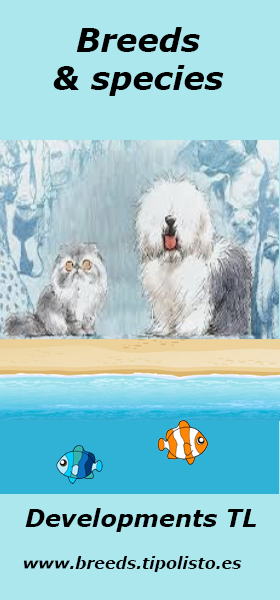
<style>
.page{position:relative;width:280px;height:600px;background:#ace7ed}
.page>*{position:absolute;margin:0}
.t1{font:32px "Verdana-BoldItalic";color:#000000}
.t2{font:24px "Verdana-BoldItalic";color:#010101}
.t3{font:16px "Verdana-BoldItalic";color:#010101}
</style>
<div class="page">
<p class="t1" style="left:53px;top:27px;width:171px;height:69px;text-align:center">Breeds<br>&amp; species</p>
<p class="t2" style="left:25px;top:508px;width:231px;height:24px">Developments TL</p>
<p class="t3" style="left:23px;top:556px;width:219px;height:16px">www.breeds.tipolisto.es</p>
</div>
